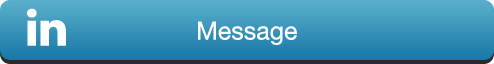
<style>
.page{position:relative;width:494px;height:64px}
.page>*{position:absolute;margin:0}
.t1{font:25px "HelveticaNeue";color:#ffffff}
</style>
<div class="page">
<p class="t1" style="left:198px;top:21px;width:99px;height:24px">Message</p>
</div>
